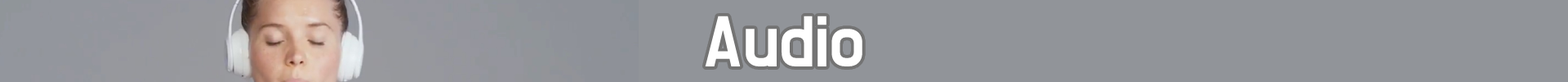
<style>
.page{position:relative;width:1568px;height:82px;background:#919499}
.page>*{position:absolute;margin:0}
.t1{font:73.5px "DoHyeon-Regular";color:#ffffff}
</style>
<div class="page">
<p class="t1" style="left:705px;top:16px;width:157px;height:50px">Audio</p>
</div>
